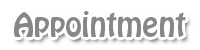
<style>
.page{position:relative;width:200px;height:50px;background:#ffffff}
.page>*{position:absolute;margin:0}
.t1{font:30px "HoboStd";color:#878787}
</style>
<div class="page">
<p class="t1" style="left:14px;top:11px;width:172px;height:26px">Appointment</p>
</div>
